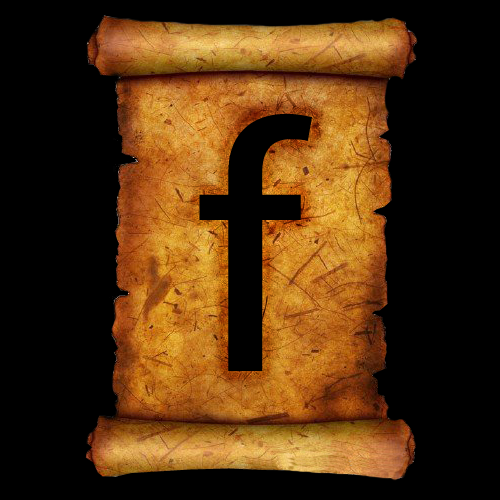
<style>
.page{position:relative;width:500px;height:500px;background:#000000}
.page>*{position:absolute;margin:0}
.t1{font:332.5px "Roboto-Regular";letter-spacing:0.025em;color:#000000;scale:1.05 1}
</style>
<div class="page">
<p class="t1" style="left:199px;top:113px;width:113px;height:258px">f</p>
</div>
